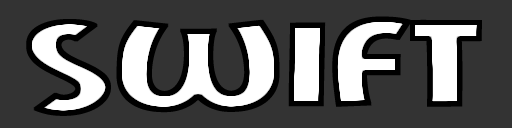
<style>
.page{position:relative;width:512px;height:128px;background:#333333}
.page>*{position:absolute;margin:0}
.t1{font:120px "MailRayStuff";color:#ffffff;scale:1.74 1}
</style>
<div class="page">
<p class="t1" style="left:27px;top:17px;width:454px;height:98px">SWIFT</p>
</div>
